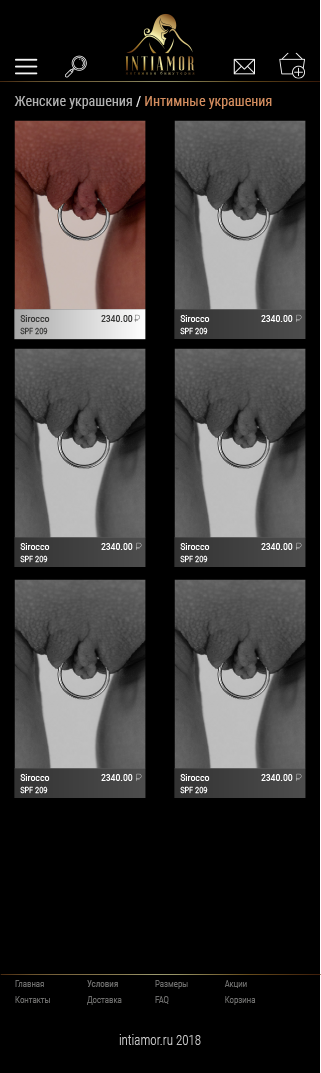
<style>
.page{position:relative;width:321px;height:1073px;background:#000000}
.page>*{position:absolute;margin:0}
.t1{font:14px "RobotoCondensed-Regular";color:#d38d5e}
.t2{font:14px "RobotoCondensed-Regular";color:#b1b1b1}
.t3{font:14px "RobotoCondensed-Regular";color:#ececec}
.t4{font:9.8px "RobotoCondensed-Regular";color:#3c3c3b}
.t5{font:9.8px "RobotoCondensed-Regular";color:#fefefe}
.t6{font:9.8px "RobotoCondensed-Regular";color:#ffffff}
.t7{font:8.4px "RobotoCondensed-Light";color:#3c3c3b}
.t8{font:8.4px "RobotoCondensed-Light";color:#ffffff}
.t9{font:9px/16px "RobotoCondensed-Light";color:#6f6f6e}
.t10{font:9px/16px "RobotoCondensed-Regular";color:#6f6f6e}
.t11{font:14px "RobotoCondensed-Light";color:#c6c6c5;scale:0.92 1}
</style>
<div class="page">
<p class="t1" style="left:14px;top:96px;width:258px;height:13px"><span class="t2">Женские украшения</span><span class="t3"> / </span>Интимные украшения</p>
<p class="t4" style="left:20px;top:315px;width:30px;height:7px">Sirocco</p>
<p class="t4" style="left:101px;top:315px;width:32px;height:7px">2340.00</p>
<p class="t5" style="left:180px;top:315px;width:30px;height:7px">Sirocco</p>
<p class="t6" style="left:261px;top:315px;width:32px;height:7px">2340.00</p>
<p class="t7" style="left:20px;top:327px;width:28px;height:8px">SPF 209</p>
<p class="t8" style="left:180px;top:327px;width:28px;height:8px">SPF 209</p>
<p class="t5" style="left:20px;top:543px;width:30px;height:7px">Sirocco</p>
<p class="t6" style="left:101px;top:543px;width:32px;height:7px">2340.00</p>
<p class="t5" style="left:180px;top:543px;width:30px;height:7px">Sirocco</p>
<p class="t6" style="left:261px;top:543px;width:32px;height:7px">2340.00</p>
<p class="t8" style="left:20px;top:555px;width:28px;height:8px">SPF 209</p>
<p class="t8" style="left:180px;top:555px;width:28px;height:8px">SPF 209</p>
<p class="t5" style="left:20px;top:774px;width:30px;height:7px">Sirocco</p>
<p class="t6" style="left:101px;top:774px;width:32px;height:7px">2340.00</p>
<p class="t5" style="left:180px;top:774px;width:30px;height:7px">Sirocco</p>
<p class="t6" style="left:261px;top:774px;width:32px;height:7px">2340.00</p>
<p class="t8" style="left:20px;top:786px;width:28px;height:8px">SPF 209</p>
<p class="t8" style="left:180px;top:786px;width:28px;height:8px">SPF 209</p>
<p class="t9" style="left:15px;top:980px;width:35px;height:23px">Главная        <br>Контакты</p>
<p class="t9" style="left:87px;top:980px;width:35px;height:25px"><span class="t10">Условия        <br></span>Доставка</p>
<p class="t9" style="left:155px;top:980px;width:33px;height:24px">Размеры        <br>FAQ</p>
<p class="t9" style="left:224px;top:980px;width:32px;height:25px">Акции        <br>Корзина</p>
<p class="t11" style="left:119px;top:1034px;width:82px;height:11px">intiamor.ru 2018</p>
</div>
